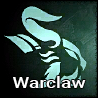
<style>
.page{position:relative;width:98px;height:98px}
.page>*{position:absolute;margin:0}
.t1{font:16px "Roboto-Medium";color:#ffffff;scale:1.2 1}
</style>
<div class="page">
<p class="t1" style="left:13px;top:76px;width:73px;height:12px">Warclaw</p>
</div>
